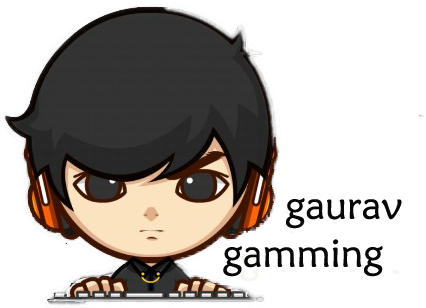
<style>
.page{position:relative;width:426px;height:308px;background:#ffffff}
.page>*{position:absolute;margin:0}
.t1{font:40px "MaiandraGD-Regular";color:#070707}
</style>
<div class="page">
<p class="t1" style="left:223px;top:198px;width:179px;height:79px;text-align:center">gaurav<br> gamming</p>
</div>
